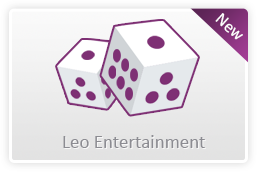
<style>
.page{position:relative;width:257px;height:172px}
.page>*{position:absolute;margin:0}
.t1{font:17px "Calibri";color:#ffffff}
.t2{font:19px "Calibri";color:#8c8c92}
</style>
<div class="page">
<p class="t1" style="left:215px;top:13px;width:28px;height:27px;rotate:42deg">New</p>
<p class="t2" style="left:63px;top:135px;width:142px;height:13px">Leo Entertainment</p>
</div>
